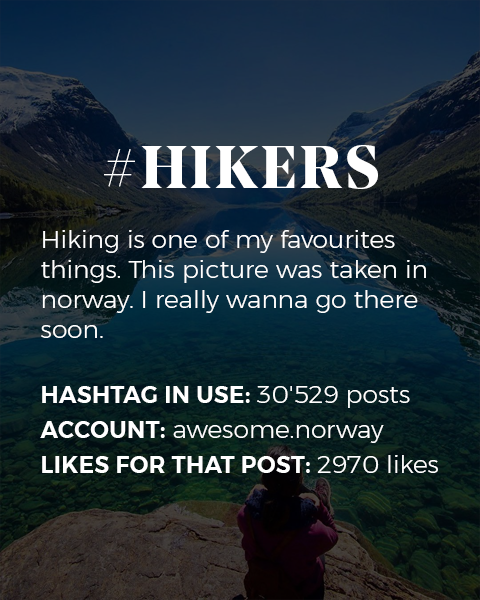
<style>
.page{position:relative;width:480px;height:600px}
.page>*{position:absolute;margin:0}
.t1{font:25px "Montserrat-Light";color:#ffffff}
.t2{font:60px "NoeDisplay-Bold";letter-spacing:0.05em;color:#ffffff;text-transform:uppercase}
.t3{font:23px/35px "Montserrat-SemiBold";letter-spacing:0.02em;color:#ffffff;text-transform:uppercase}
.t4{font:25px/35px "Montserrat-Light";color:#ffffff}
</style>
<div class="page">
<p class="t1" style="left:40px;top:145px;width:398px;height:328px;text-align:center"><span class="t2">#hikers<br><br></span>Hiking is one of my favourites things. This picture was taken in norway. I really wanna go there soon.<br><br><span class="t3">Hashtag in Use: </span><span class="t4">30'529 posts<br></span><span class="t3">ACCOUNT:</span><span class="t4"> awesome.norway<br></span><span class="t3">Likes for that post: </span><span class="t4">2970 likes</span></p>
</div>
